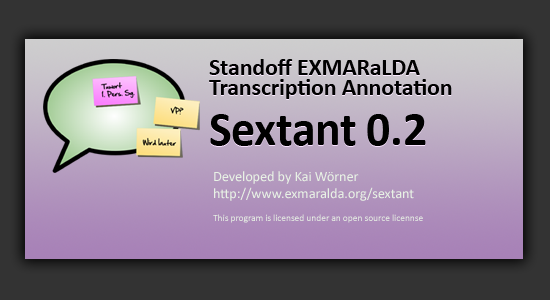
<style>
.page{position:relative;width:550px;height:300px;background:#333333}
.page>*{position:absolute;margin:0}
.t1{font:23.8px/20px "Calibri-Bold";letter-spacing:-0.005em;color:#010101}
.t2{font:47.6px "Calibri-Bold";letter-spacing:-0.005em;color:#000000}
.t3{font:14.3px "Calibri";letter-spacing:-0.005em;color:#e8f2e5}
.t4{font:9.5px "Calibri";letter-spacing:-0.005em;color:#e8f2e5}
</style>
<div class="page">
<p class="t1" style="left:209px;top:60px;width:243px;height:40px">Standoff EXMARaLDA <br>Transcription Annotation</p>
<p class="t1" style="left:209px;top:59px;width:243px;height:40px">Standoff EXMARaLDA <br>Transcription Annotation</p>
<p class="t2" style="left:210px;top:115px;width:216px;height:32px">Sextant 0.2</p>
<p class="t2" style="left:210px;top:114px;width:216px;height:32px">Sextant 0.2</p>
<p class="t3" style="left:213px;top:171px;width:210px;height:52px">Developed by Kai Wörner<br>http://www.exmaralda.org/sextant<br><span class="t4"><br>This program is licensed under an open source licennse</span></p>
</div>
